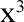
<style>
.page{position:relative;width:24px;height:22px;background:#ffffff}
.page>*{position:absolute;margin:0}
.t1{font:30px "TimesNewRomanPSMT";color:#000000;scale:1.05 1}
</style>
<div class="page">
<p class="t1" style="left:0px;top:0px;width:24px;height:22px">x3</p>
</div>
